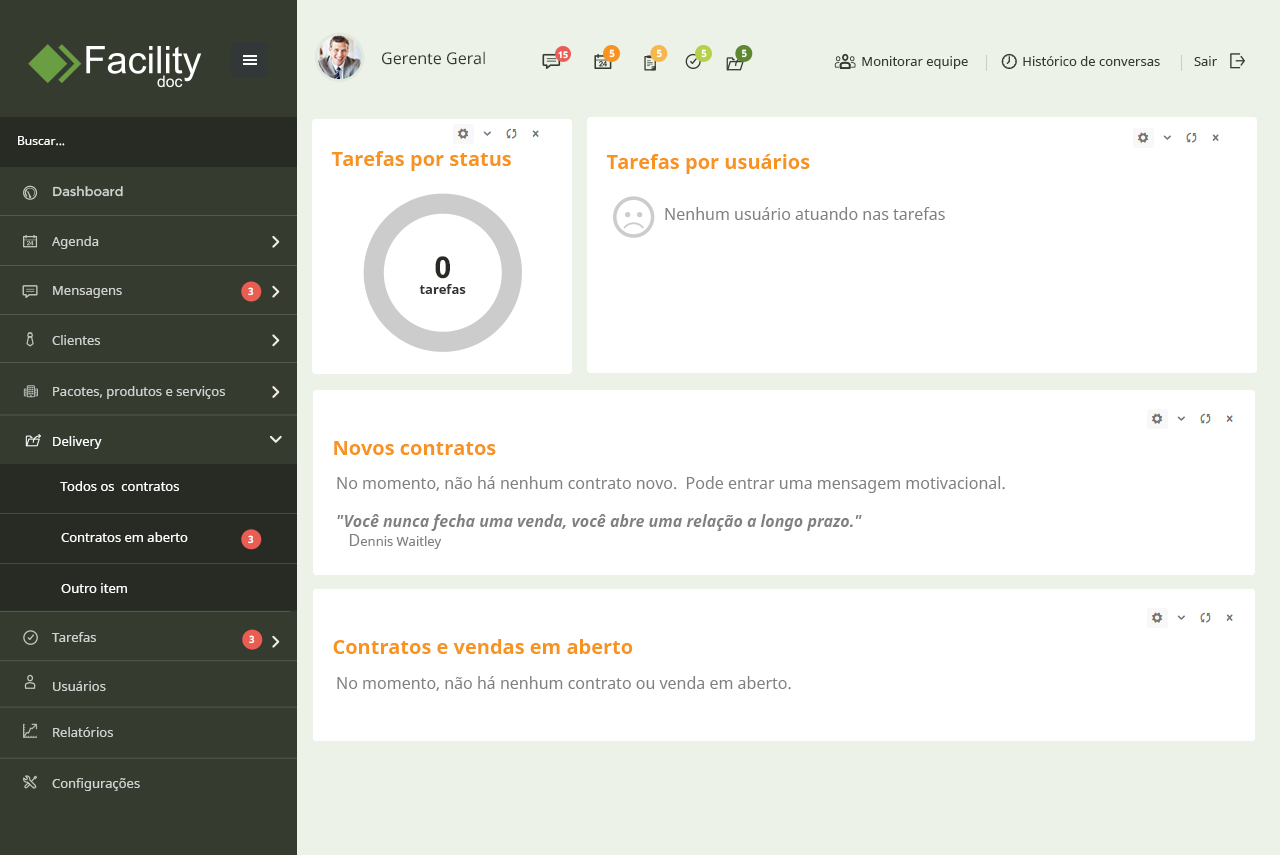
<style>
.page{position:relative;width:1280px;height:855px;background:#ffffff}
.page>*{position:absolute;margin:0}
.t1{font:16px "NotoSans";color:#353b2f}
.t2{font:9px "NotoSans-Bold";color:#ffffff}
.t3{font:10px "NotoSans-Bold";color:#ffffff}
.t4{font:13px "NotoSans";color:#353b2f}
.t5{font:12px "NotoSans";color:#ffffff}
.t6{font:20px "NotoSans-Bold";color:#f7931e}
.t7{font:13px "Montserrat-Regular";color:#d1d2d0}
.t8{font:16px "NotoSans";color:#808080}
.t9{font:13px "NotoSans";color:#d1d2d0}
.t10{font:13px "NotoSans-Bold";color:#333333}
.t11{font:30px "NotoSans-Bold";color:#272b23}
.t12{font:13px "NotoSans";color:#ffffff}
.t13{font:16px "NotoSans-BoldItalic";color:#808080}
.t14{font:13px "NotoSans";color:#808080}
</style>
<div class="page">
<p class="t1" style="left:382px;top:51px;width:103px;height:14px">Gerente Geral</p>
<p class="t2" style="left:558px;top:51px;width:10px;height:8px">15</p>
<p class="t3" style="left:609px;top:49px;width:6px;height:9px">5</p>
<p class="t3" style="left:657px;top:49px;width:5px;height:9px">5</p>
<p class="t3" style="left:701px;top:49px;width:6px;height:9px">5</p>
<p class="t3" style="left:742px;top:49px;width:5px;height:9px">5</p>
<p class="t4" style="left:862px;top:56px;width:355px;height:13px">Monitorar equipe                Histórico de conversas          Sair</p>
<p class="t5" style="left:18px;top:136px;width:47px;height:10px">Buscar...</p>
<p class="t6" style="left:331px;top:151px;width:180px;height:20px">Tarefas por status</p>
<p class="t6" style="left:606px;top:154px;width:204px;height:20px">Tarefas por usuários</p>
<p class="t7" style="left:53px;top:186px;width:70px;height:11px">Dashboard</p>
<p class="t8" style="left:665px;top:207px;width:280px;height:13px">Nenhum usuário atuando nas tarefas</p>
<p class="t9" style="left:52px;top:236px;width:47px;height:13px">Agenda</p>
<p class="t10" style="left:419px;top:256px;width:47px;height:38px;text-align:center"><span class="t11">0<br></span>tarefas</p>
<p class="t9" style="left:53px;top:286px;width:69px;height:12px">Mensagens</p>
<p class="t3" style="left:248px;top:287px;width:6px;height:9px">3</p>
<p class="t9" style="left:52px;top:335px;width:48px;height:10px">Clientes</p>
<p class="t9" style="left:53px;top:386px;width:172px;height:13px">Pacotes, produtos e serviços</p>
<p class="t12" style="left:53px;top:436px;width:49px;height:13px">Delivery</p>
<p class="t6" style="left:334px;top:441px;width:162px;height:14px">Novos contratos</p>
<p class="t12" style="left:60px;top:481px;width:119px;height:10px">Todos os  contratos</p>
<p class="t8" style="left:337px;top:476px;width:668px;height:73px">No momento, não há nenhum contrato novo.  Pode entrar uma mensagem motivacional.<br><br><span class="t13">"Você nunca fecha uma venda, você abre uma relação a longo prazo."<br></span>   D<span class="t14">ennis Waitley</span></p>
<p class="t12" style="left:61px;top:532px;width:127px;height:10px">Contratos em aberto</p>
<p class="t3" style="left:248px;top:535px;width:6px;height:9px">3</p>
<p class="t12" style="left:61px;top:583px;width:66px;height:10px">Outro item</p>
<p class="t9" style="left:52px;top:632px;width:44px;height:10px">Tarefas</p>
<p class="t3" style="left:249px;top:635px;width:6px;height:9px">3</p>
<p class="t6" style="left:333px;top:639px;width:300px;height:15px">Contratos e vendas em aberto</p>
<p class="t8" style="left:337px;top:676px;width:454px;height:15px">No momento, não há nenhum contrato ou venda em aberto.</p>
<p class="t9" style="left:53px;top:681px;width:53px;height:10px">Usuários</p>
<p class="t9" style="left:53px;top:727px;width:60px;height:10px">Relatórios</p>
<p class="t9" style="left:52px;top:778px;width:88px;height:13px">Configurações</p>
</div>
